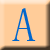
<style>
.page{position:relative;width:50px;height:50px;background:#ffcc99}
.page>*{position:absolute;margin:0}
.t1{font:48px "SimSun";color:#0066cc}
</style>
<div class="page">
<p class="t1" style="left:12px;top:8px;width:24px;height:33px">A</p>
</div>
